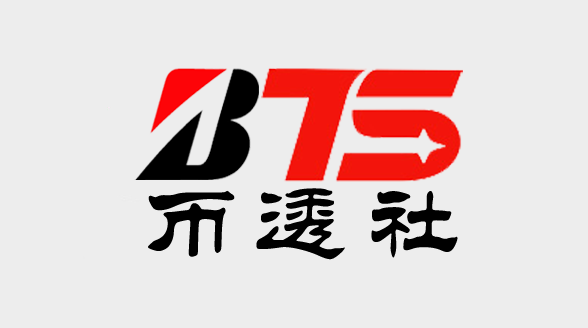
<style>
.page{position:relative;width:588px;height:328px;background:#ededed}
.page>*{position:absolute;margin:0}
.t1{font:100.8px "STLiti";letter-spacing:0.1em;color:#000000}
</style>
<div class="page">
<p class="t1" style="left:148px;top:188px;width:310px;height:72px">币透社</p>
</div>
